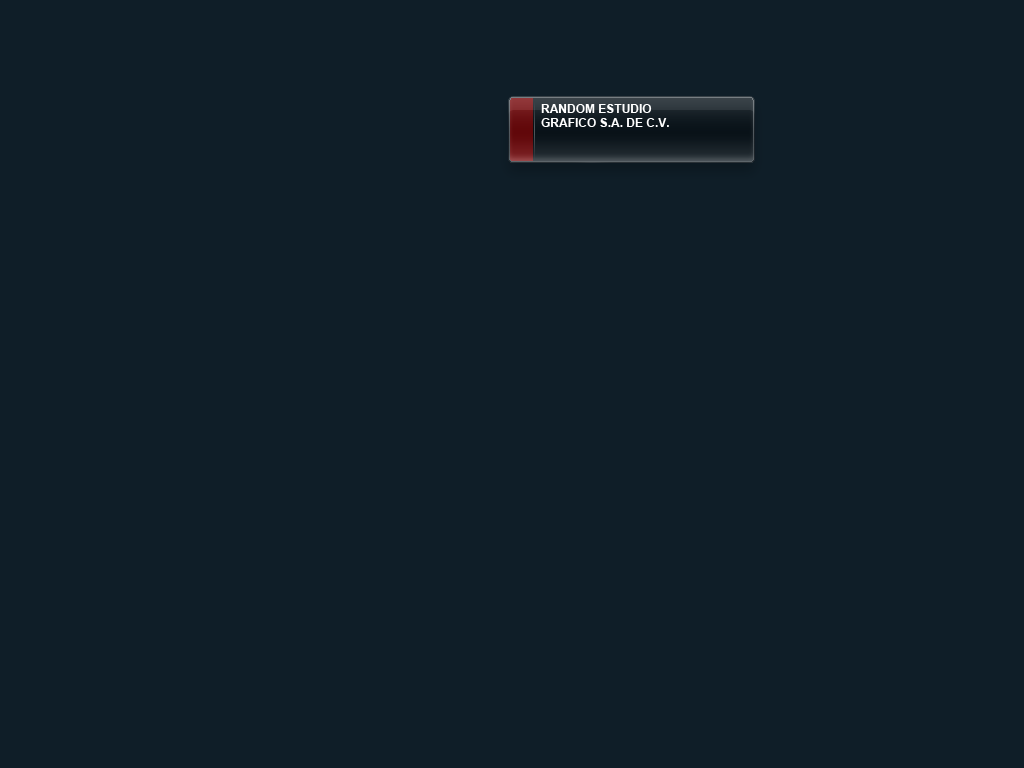
<style>
.page{position:relative;width:1024px;height:768px;background:#0f1e28}
.page>*{position:absolute;margin:0}
.t1{font:12px "Arial-BoldMT";color:#ffffff}
</style>
<div class="page">
<p class="t1" style="left:541px;top:104px;width:128px;height:23px">RANDOM ESTUDIO<br>GRAFICO S.A. DE C.V.</p>
</div>
